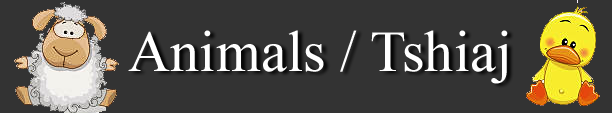
<style>
.page{position:relative;width:612px;height:113px;background:#333333}
.page>*{position:absolute;margin:0}
.t1{font:58.3px "TimesNewRomanPSMT";color:#ffffff}
</style>
<div class="page">
<p class="t1" style="left:128px;top:30px;width:380px;height:54px">Animals / Tshiaj</p>
</div>
